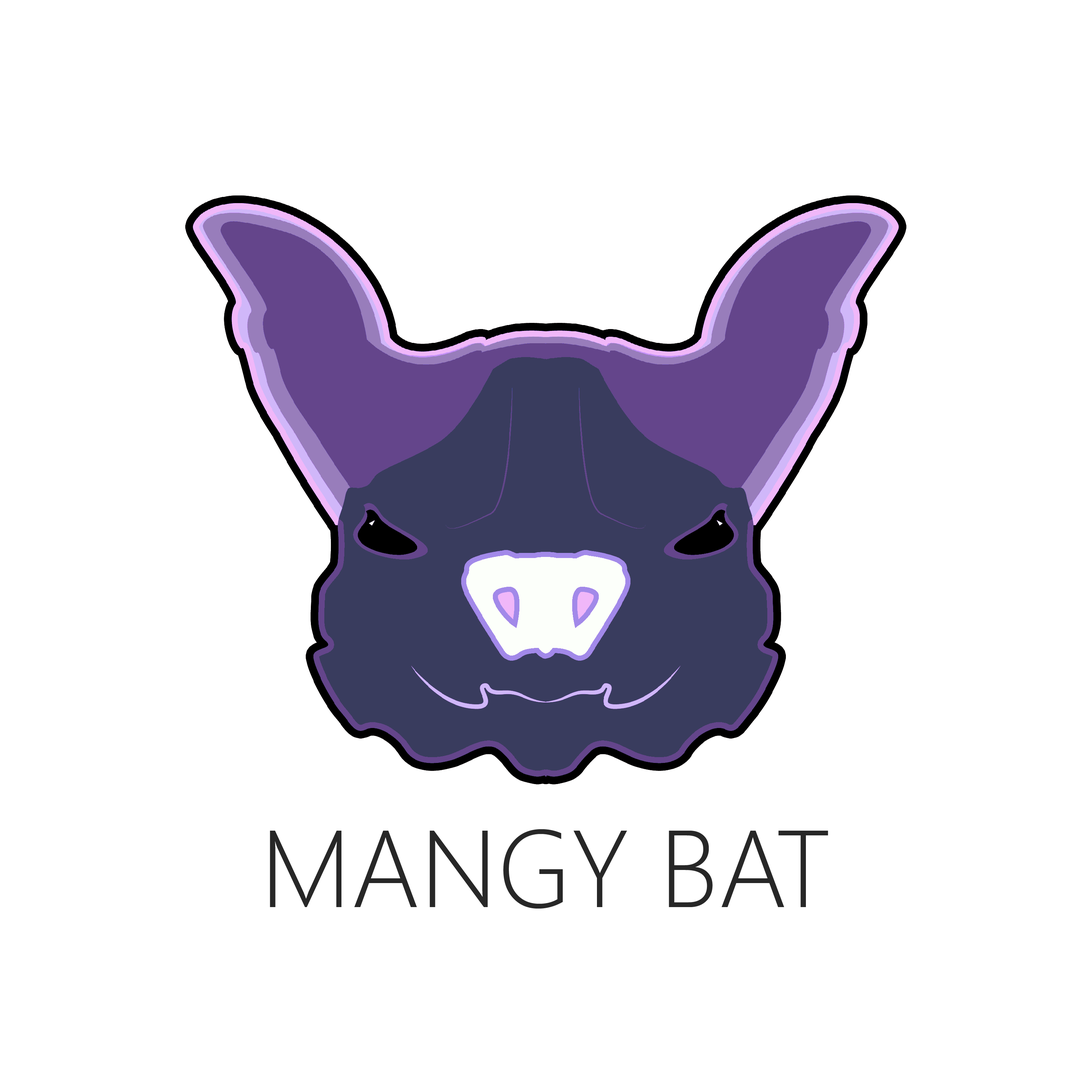
<style>
.page{position:relative;width:1092px;height:1092px;background:#ffffff}
.page>*{position:absolute;margin:0}
.t1{font:109.2px "SegoeUI-Light";color:#272727}
</style>
<div class="page">
<p class="t1" style="left:270px;top:829px;width:558px;height:80px">MANGY BAT</p>
</div>
